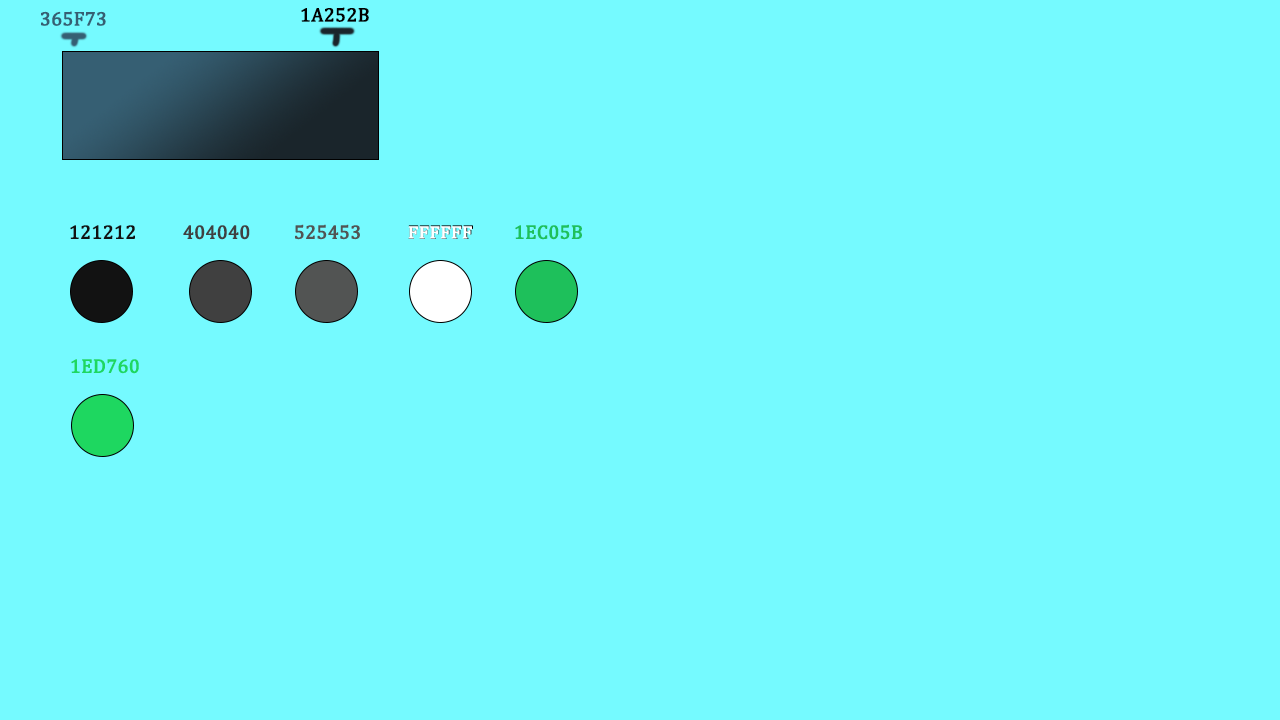
<style>
.page{position:relative;width:1280px;height:720px;background:#75faff}
.page>*{position:absolute;margin:0}
.t1{font:33.3px "CambriaMath";color:#365f73;text-transform:uppercase;font-weight:bold}
.t2{font:33.3px "CambriaMath";color:#000000;text-transform:uppercase;font-weight:bold}
.t3{font:33.3px "CambriaMath";color:#121212;text-transform:uppercase;font-weight:bold}
.t4{font:33.3px "CambriaMath";color:#404040;text-transform:uppercase;font-weight:bold}
.t5{font:33.3px "CambriaMath";color:#525453;text-transform:uppercase;font-weight:bold}
.t6{font:33.3px "CambriaMath";text-transform:uppercase;font-weight:bold}
.t7{font:29.2px "CambriaMath";color:#ffffff;text-transform:uppercase;font-weight:bold;scale:1.13 1}
.t8{font:33.3px "CambriaMath";color:#1ec05b;text-transform:uppercase;font-weight:bold}
.t9{font:33.3px "CambriaMath";color:#1ed760;text-transform:uppercase;font-weight:bold}
</style>
<div class="page">
<p class="t1" style="left:41px;top:11px;width:65px;height:15px">365f73</p>
<p class="t2" style="left:301px;top:7px;width:68px;height:15px">1a252b</p>
<p class="t3" style="left:70px;top:225px;width:65px;height:14px">121212</p>
<p class="t4" style="left:183px;top:225px;width:67px;height:15px">404040</p>
<p class="t5" style="left:295px;top:224px;width:65px;height:16px">525453</p>
<p class="t6" style="left:408px;top:225px;width:65px;height:14px">ffffff</p>
<p class="t7" style="left:408px;top:226px;width:64px;height:13px">ffffff</p>
<p class="t8" style="left:515px;top:224px;width:67px;height:16px">1ec05b</p>
<p class="t9" style="left:71px;top:359px;width:68px;height:15px">1ed760</p>
</div>
